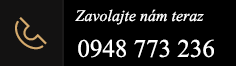
<style>
.page{position:relative;width:236px;height:66px;background:#000000}
.page>*{position:absolute;margin:0}
.t1{font:16px "TimesNewRomanPS-ItalicMT";color:#ffffff}
.t2{font:25px "TimesNewRomanPSMT";color:#ffffff}
</style>
<div class="page">
<p class="t1" style="left:75px;top:9px;width:129px;height:16px">Zavolajte nám teraz</p>
<p class="t2" style="left:78px;top:39px;width:136px;height:19px">0948 773 236</p>
</div>
